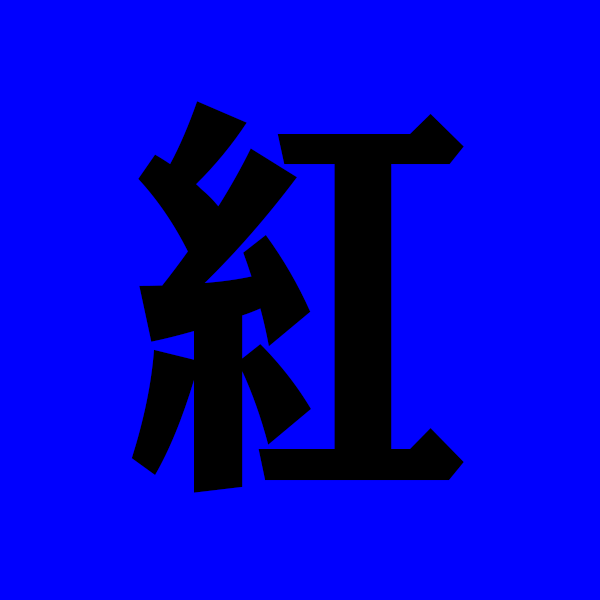
<style>
.page{position:relative;width:600px;height:600px;background:#0000ff}
.page>*{position:absolute;margin:0}
.t1{font:420px "DFLiKingHei-W8-WIN-BF";color:#000000;scale:0.83 1}
</style>
<div class="page">
<p class="t1" style="left:131px;top:101px;width:333px;height:392px">紅</p>
</div>
